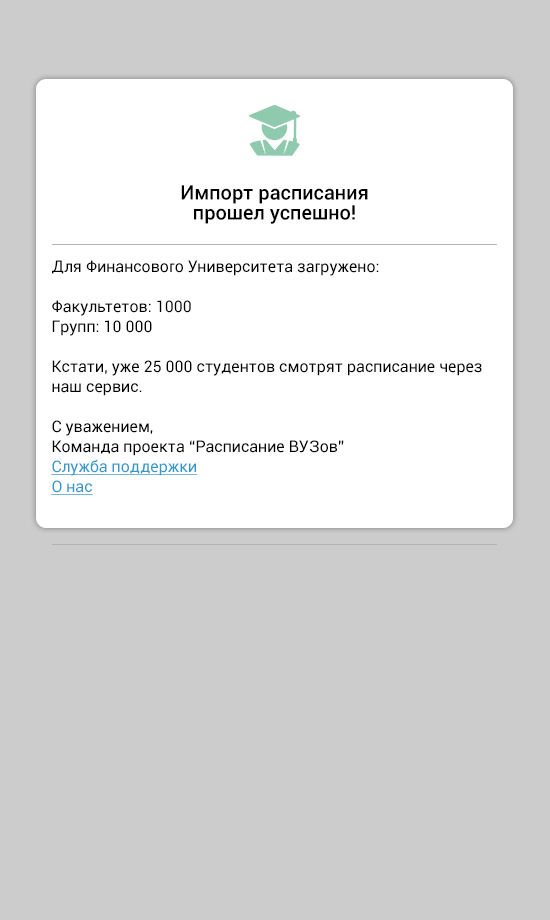
<style>
.page{position:relative;width:550px;height:920px;background:#cccccc}
.page>*{position:absolute;margin:0}
.t1{font:20px/20px "Roboto-Medium";color:#000000}
.t2{font:16px/20px "Roboto-Regular";color:#000000}
.t3{font:16px/20px "Roboto-Regular";color:#3399cc;text-decoration:underline}
</style>
<div class="page">
<p class="t1" style="left:181px;top:185px;width:187px;height:39px;text-align:center">Импорт расписания<br>прошел успешно!</p>
<p class="t2" style="left:51px;top:260px;width:431px;height:235px">Для Финансового Университета загружено:<br><br>Факультетов: 1000<br>Групп: 10 000<br><br>Кстати, уже 25 000 студентов смотрят расписание через<br>наш сервис.<br><br>С уважением, <br>Команда проекта “Расписание ВУЗов”<br><span class="t3">Служба поддержки<br>О нас</span></p>
</div>
